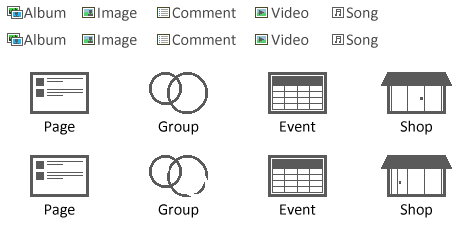
<style>
.page{position:relative;width:470px;height:239px;background:#ffffff}
.page>*{position:absolute;margin:0}
.t1{font:16px "Calibri";color:#474747}
.t2{font:16px "Calibri";color:#000000}
.t3{font:16px "Calibri";color:#e6931d}
</style>
<div class="page">
<p class="t1" style="left:10px;top:7px;width:56px;height:11px">O Album</p>
<p class="t1" style="left:83px;top:7px;width:54px;height:14px">O Image</p>
<p class="t1" style="left:158px;top:7px;width:78px;height:11px">O Comment</p>
<p class="t1" style="left:257px;top:7px;width:52px;height:11px">O Video</p>
<p class="t1" style="left:332px;top:7px;width:46px;height:14px">O Song</p>
<p class="t1" style="left:10px;top:34px;width:56px;height:11px">O Album</p>
<p class="t1" style="left:83px;top:34px;width:54px;height:14px">O Image</p>
<p class="t1" style="left:158px;top:34px;width:78px;height:11px">O Comment</p>
<p class="t1" style="left:257px;top:34px;width:52px;height:11px">O Video</p>
<p class="t1" style="left:332px;top:34px;width:46px;height:14px">O Song</p>
<p class="t2" style="left:45px;top:121px;width:30px;height:14px"><span class="t3"><br><br><br></span>Page</p>
<p class="t2" style="left:158px;top:121px;width:41px;height:14px"><span class="t3"><br><br><br></span>Group</p>
<p class="t2" style="left:280px;top:121px;width:36px;height:11px"><span class="t3"><br><br><br></span>Event</p>
<p class="t2" style="left:400px;top:120px;width:32px;height:15px"><span class="t3"><br><br><br></span>Shop</p>
<p class="t2" style="left:45px;top:204px;width:30px;height:14px"><span class="t3"><br><br><br></span>Page</p>
<p class="t2" style="left:158px;top:204px;width:41px;height:14px"><span class="t3"><br><br><br></span>Group</p>
<p class="t2" style="left:280px;top:204px;width:36px;height:11px"><span class="t3"><br><br><br></span>Event</p>
<p class="t2" style="left:400px;top:203px;width:32px;height:15px"><span class="t3"><br><br><br></span>Shop</p>
</div>
